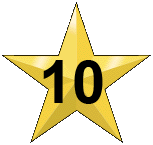
<style>
.page{position:relative;width:153px;height:145px;background:#ffffff}
.page>*{position:absolute;margin:0}
.t1{font:60px "Arial-BoldMT";color:#000000}
</style>
<div class="page">
<p class="t1" style="left:43px;top:60px;width:60px;height:44px">10</p>
</div>
